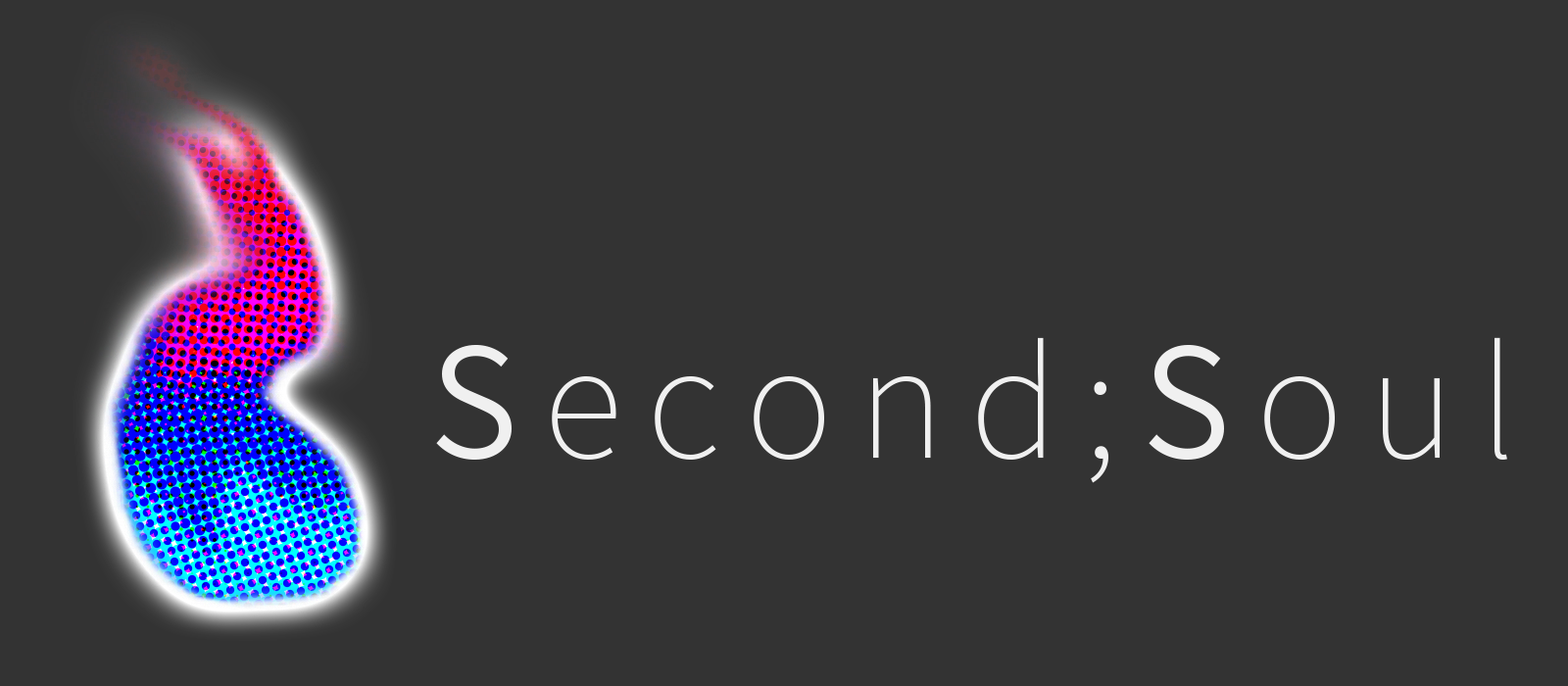
<style>
.page{position:relative;width:1568px;height:686px;background:#333333}
.page>*{position:absolute;margin:0}
.t1{font:150.9px "SourceHanSansJP-ExtraLight";letter-spacing:0.16em;color:#f0f0f0}
.t2{font:150.9px "SourceHanSansJP-Normal";letter-spacing:0.16em;color:#f0f0f0}
</style>
<div class="page">
<p class="t1" style="left:436px;top:337px;width:1071px;height:146px"><span class="t2">S</span>econd;<span class="t2">S</span>oul</p>
</div>
